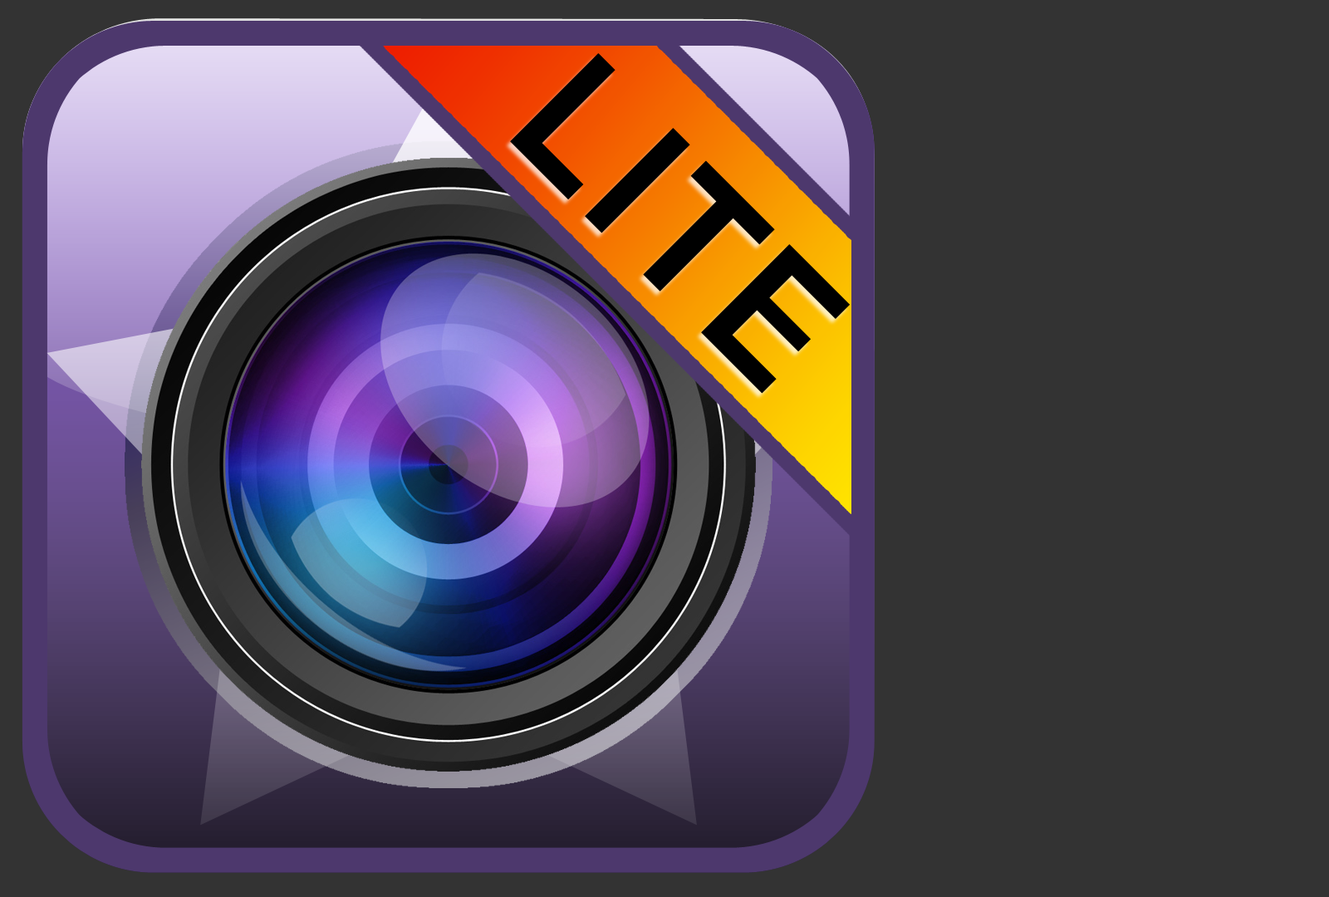
<style>
.page{position:relative;width:1329px;height:897px;background:#333333}
.page>*{position:absolute;margin:0}
.t1{font:186.9px "EurostileBold";letter-spacing:0.06em;color:#000000}
</style>
<div class="page">
<p class="t1" style="left:510px;top:53px;width:340px;height:341px;rotate:45deg">LITE</p>
</div>
